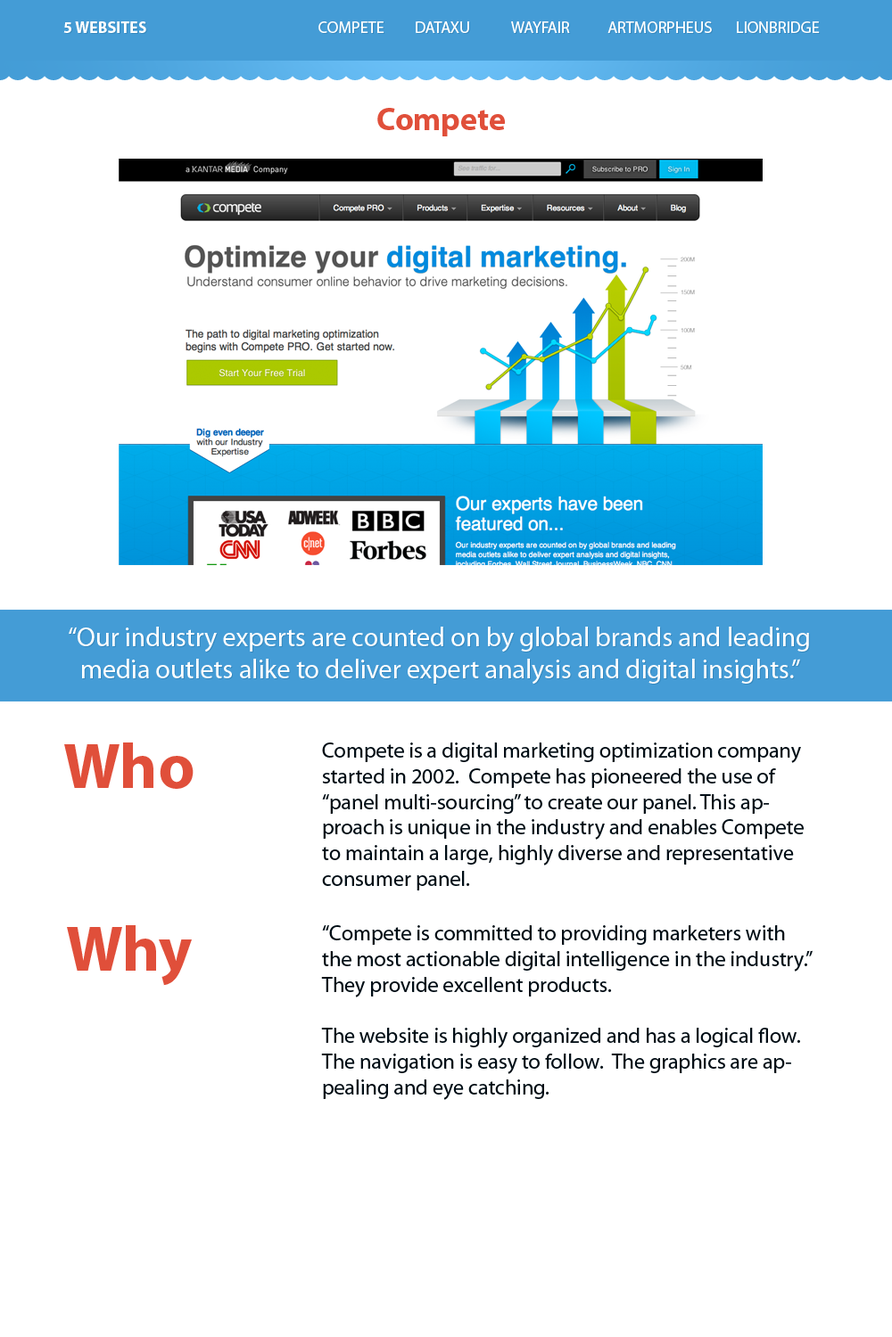
<style>
.page{position:relative;width:892px;height:1337px;background:#ffffff}
.page>*{position:absolute;margin:0}
.t1{font:16px "MyriadPro-Bold";color:#ffffff}
.t2{font:16px "MyriadPro-Regular";color:#ffffff}
.t3{font:32.1px "MyriadPro-Bold";color:#e04f3a}
.t4{font:26.7px "MyriadPro-Regular";color:#ffffff}
.t5{font:64.2px "MyriadPro-Bold";color:#e04f3a}
.t6{font:21.4px "MyriadPro-Regular";color:#000d15}
</style>
<div class="page">
<p class="t1" style="left:63px;top:21px;width:83px;height:12px">5 WEBSITES</p>
<p class="t2" style="left:318px;top:21px;width:501px;height:12px">COMPETE DATAXU  WAYFAIR  ARTMORPHEUS LIONBRIDGE</p>
<p class="t3" style="left:377px;top:108px;width:128px;height:28px">Compete</p>
<p class="t4" style="left:69px;top:627px;width:740px;height:58px;text-align:center">“Our industry experts are counted on by global brands and leading media outlets alike to deliver expert analysis and digital insights.”</p>
<p class="t5" style="left:64px;top:743px;width:129px;height:46px">Who</p>
<p class="t6" style="left:322px;top:743px;width:481px;height:148px">Compete is a digital marketing optimization company started in 2002.  Compete has pioneered the use of “panel multi-sourcing” to create our panel. This approach is unique in the industry and enables Compete to maintain a large, highly diverse and representative consumer panel.</p>
<p class="t5" style="left:67px;top:925px;width:125px;height:61px">Why</p>
<p class="t6" style="left:321px;top:925px;width:491px;height:175px">“Compete is committed to providing marketers with the most actionable digital intelligence in the industry.”  They provide excellent products.<br><br>The website is highly organized and has a logical flow.  The navigation is easy to follow.  The graphics are appealing and eye catching.</p>
</div>
